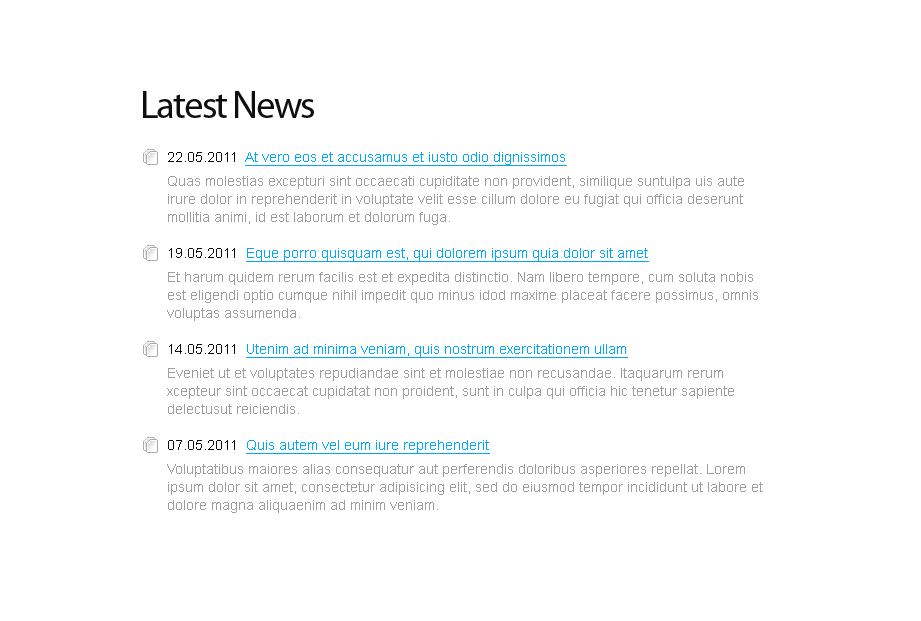
<style>
.page{position:relative;width:921px;height:621px;background:#ffffff}
.page>*{position:absolute;margin:0}
.t1{font:39px "MyriadPro-Regular";letter-spacing:-0.05em;color:#0f0f0f}
.t2{font:14px/18px "ArialMT";color:#9d9d9d}
.t3{font:14px/18px "ArialMT";color:#0f0f0f}
.t4{font:14px/18px "ArialMT";color:#00a9ff;text-decoration:underline}
.t5{font:14px/24px "ArialMT";color:#9d9d9d}
</style>
<div class="page">
<p class="t1" style="left:143px;top:91px;width:171px;height:27px">Latest News</p>
<p class="t2" style="left:167px;top:152px;width:596px;height:361px"><span class="t3">22.05.2011  </span><span class="t4">At vero eos et accusamus et iusto odio dignissimos<br></span><span class="t5">Q</span>uas molestias excepturi sint occaecati cupiditate non provident, similique suntulpa uis aute irure dolor in reprehenderit in voluptate velit esse cillum dolore eu fugiat qui officia deserunt mollitia animi, id est laborum et dolorum fuga.<br><br><span class="t3">19.05.2011  </span><span class="t4">Eque porro quisquam est, qui dolorem ipsum quia dolor sit amet<br></span><span class="t5">E</span>t harum quidem rerum facilis est et expedita distinctio. Nam libero tempore, cum soluta nobis est eligendi optio cumque nihil impedit quo minus idod maxime placeat facere possimus, omnis voluptas assumenda.<br><br><span class="t3">14.05.2011  </span><span class="t4">Utenim ad minima veniam, quis nostrum exercitationem ullam<br></span><span class="t5">E</span>veniet ut et voluptates repudiandae sint et molestiae non recusandae. Itaquarum rerum xcepteur sint occaecat cupidatat non proident, sunt in culpa qui officia hic tenetur sapiente delectusut reiciendis.<br><br><span class="t3">07.05.2011  </span><span class="t4">Quis autem vel eum iure reprehenderit<br></span><span class="t5">V</span>oluptatibus maiores alias consequatur aut perferendis doloribus asperiores repellat. Lorem ipsum dolor sit amet, consectetur adipisicing elit, sed do eiusmod tempor incididunt ut labore et dolore magna aliquaenim ad minim veniam.<br><br>, quis nostrud exercitation ullamco laboris nisi ut aliquip ex ea commodo consequat. Duis aute irure dolor in reprehenderit in voluptate velit esse cillum dolore eu fugiat nulla pariatur. Excepteur sint occaecat cupidatat non proident, sunt in culpa qui officia deserunt mollit anim id est laborum.</p>
</div>
